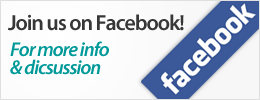
<style>
.page{position:relative;width:260px;height:100px}
.page>*{position:absolute;margin:0}
.t1{font:22px "MyriadPro-Semibold";letter-spacing:-0.05em;color:#373737}
.t2{font:20px/18px "MyriadPro-SemiboldIt";letter-spacing:-0.05em;color:#009999}
</style>
<div class="page">
<p class="t1" style="left:8px;top:14px;width:176px;height:17px">Join us on Facebook!</p>
<p class="t2" style="left:10px;top:41px;width:99px;height:34px">For more info<br>&amp; dicsussion</p>
</div>
